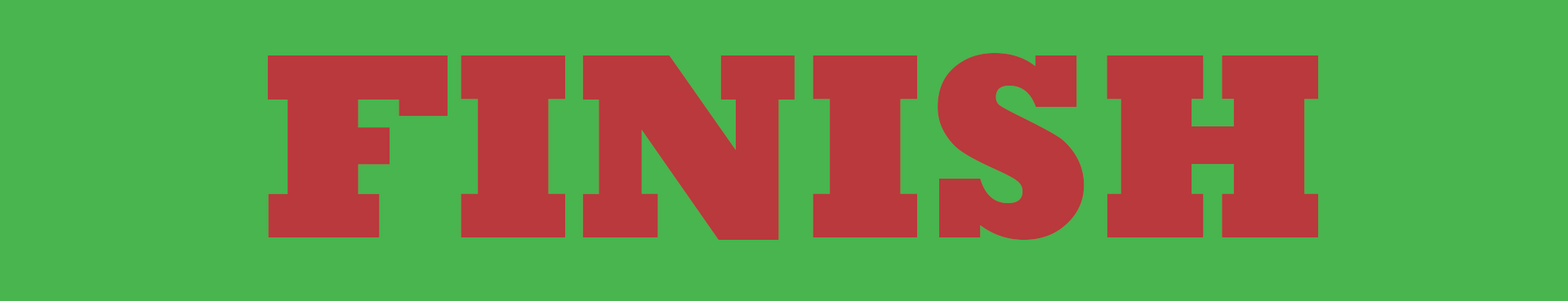
<style>
.page{position:relative;width:1568px;height:301px;background:#48b54f}
.page>*{position:absolute;margin:0}
.t1{font:268.8px "Rockwell-ExtraBold";color:#b9393d}
</style>
<div class="page">
<p class="t1" style="left:267px;top:53px;width:1052px;height:187px">FINISH</p>
</div>
